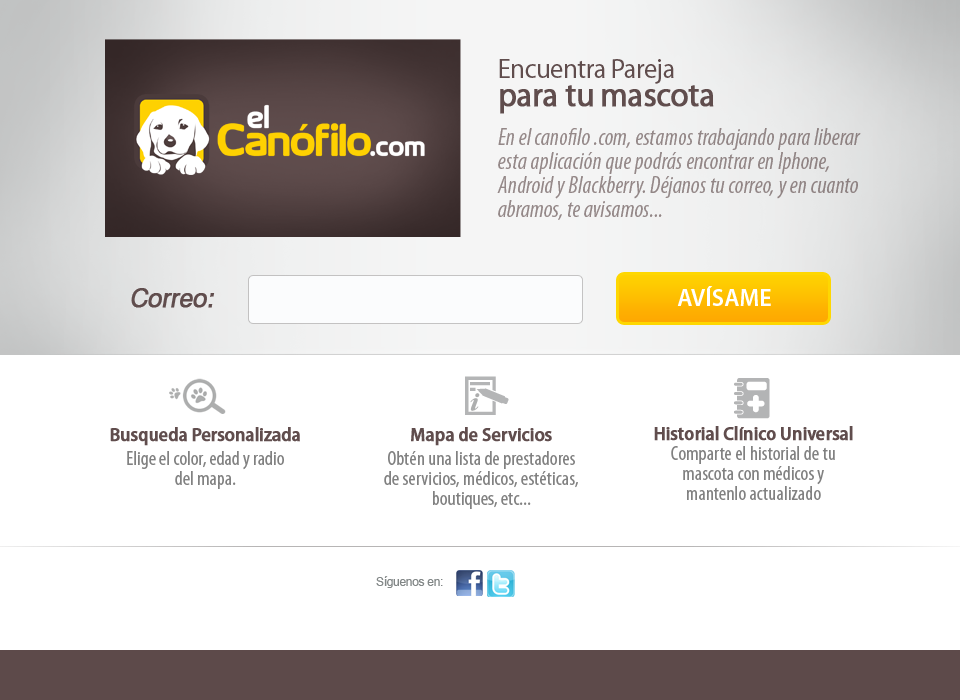
<style>
.page{position:relative;width:960px;height:700px;background:#ffffff}
.page>*{position:absolute;margin:0}
.t1{font:27.8px/27.8px "MyriadPro-Regular";letter-spacing:-0.025em;color:#604d4d}
.t2{font:33.3px/27.8px "MyriadPro-Regular";letter-spacing:-0.025em;color:#604d4d;font-weight:bold}
.t3{font:24px/24px "MyriadPro-CondIt";letter-spacing:0.01em;color:#938787;scale:0.95 1}
.t4{font:26px "Swiss721BT-Roman";letter-spacing:-0.025em;color:#604d4d;font-weight:bold;font-style:italic;scale:0.95 1}
.t5{font:24px "MyriadPro-Semibold";color:#ffffff}
.t6{font:20px/24px "MyriadPro-Cond";color:#818181}
.t7{font:19px/24px "MyriadPro-Semibold";letter-spacing:-0.025em;color:#604d4d;font-weight:bold;scale:0.95 1}
.t8{font:20px/20px "MyriadPro-Cond";color:#818181}
.t9{font:20px/20px "MyriadPro-Cond";letter-spacing:0.005em;color:#818181}
.t10{font:20px/24px "MyriadPro-Cond";letter-spacing:0.005em;color:#818181}
.t11{font:12px "ArialMT";letter-spacing:-0.025em;color:#828787}
</style>
<div class="page">
<p class="t1" style="left:499px;top:59px;width:215px;height:55px">Encuentra Pareja<br><span class="t2">para tu mascota</span></p>
<p class="t3" style="left:497px;top:128px;width:364px;height:92px">En el canofilo .com, estamos trabajando para liberar esta aplicación que podrás encontrar en Iphone, Android y Blackberry. Déjanos tu correo, y en cuanto abramos, te avisamos...</p>
<p class="t4" style="left:131px;top:288px;width:84px;height:20px">Correo:</p>
<p class="t5" style="left:677px;top:286px;width:94px;height:20px">AVÍSAME</p>
<p class="t6" style="left:110px;top:427px;width:190px;height:62px;text-align:center"><span class="t7">Busqueda Personalizada<br></span>Elige el color, edad y radio<br><span class="t8">del mapa.</span></p>
<p class="t9" style="left:384px;top:427px;width:194px;height:82px;text-align:center"><span class="t7">Mapa de Servicios<br></span><span class="t10">Obtén una lista de prestadores<br></span>de servicios, médicos, estéticas,<br>boutiques, etc...</p>
<p class="t9" style="left:654px;top:426px;width:199px;height:74px;text-align:center"><span class="t7">Historial Clínico Universal<br></span>Comparte el historial de tu<br>mascota con médicos y<br>mantenlo actualizado</p>
<p class="t11" style="left:376px;top:576px;width:67px;height:12px">Síguenos en:</p>
</div>
